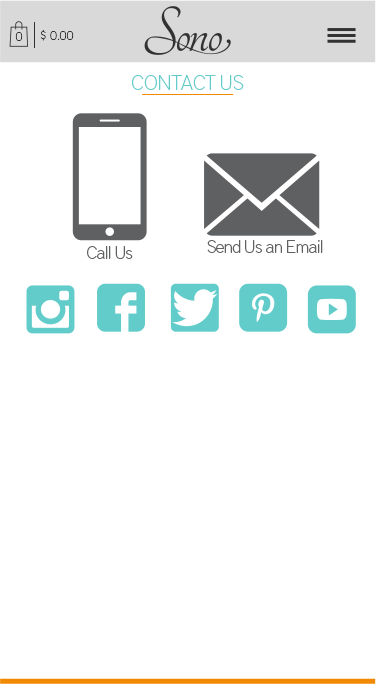
<style>
.page{position:relative;width:376px;height:691px;background:#ffffff}
.page>*{position:absolute;margin:0}
.t1{font:12.4px "DistrictPro-Thin";color:#323232}
.t2{font:21px "DistrictPro-Thin";color:#65cbc9}
.t3{font:18px "DistrictPro-Thin";letter-spacing:-0.031em;color:#5f6062}
</style>
<div class="page">
<p class="t1" style="left:40px;top:29px;width:34px;height:12px">$ 0.00</p>
<p class="t1" style="left:15px;top:32px;width:8px;height:9px">0</p>
<p class="t2" style="left:132px;top:75px;width:112px;height:15px">CONTACT US</p>
<p class="t3" style="left:87px;top:246px;width:46px;height:13px">Call Us</p>
<p class="t3" style="left:207px;top:240px;width:116px;height:13px">Send Us an Email</p>
</div>
